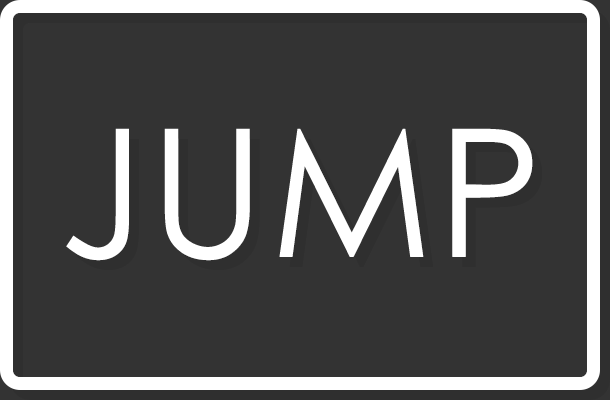
<style>
.page{position:relative;width:610px;height:400px;background:#333333}
.page>*{position:absolute;margin:0}
.t1{font:177.6px "CenturyGothic";color:#ffffff;font-weight:bold}
</style>
<div class="page">
<p class="t1" style="left:66px;top:128px;width:467px;height:133px">JUMP</p>
</div>
